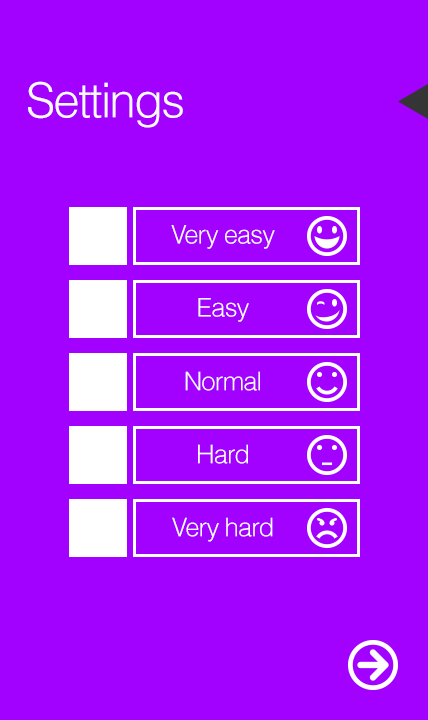
<style>
.page{position:relative;width:428px;height:720px;background:#a200ff}
.page>*{position:absolute;margin:0}
.t1{font:48px "Helvetica-Light";letter-spacing:-0.04em;color:#fffbfb}
.t2{font:25.8px "Helvetica-Light";letter-spacing:-0.04em;color:#fffbfb}
.t3{font:25.7px "Helvetica-Light";letter-spacing:-0.04em;color:#fffbfb}
</style>
<div class="page">
<p class="t1" style="left:28px;top:81px;width:155px;height:47px">Settings</p>
<p class="t2" style="left:171px;top:225px;width:104px;height:24px">Very easy</p>
<p class="t3" style="left:198px;top:298px;width:51px;height:24px">Easy</p>
<p class="t3" style="left:185px;top:371px;width:75px;height:20px">Normal</p>
<p class="t3" style="left:198px;top:444px;width:50px;height:20px">Hard</p>
<p class="t3" style="left:172px;top:517px;width:101px;height:25px">Very hard</p>
</div>
